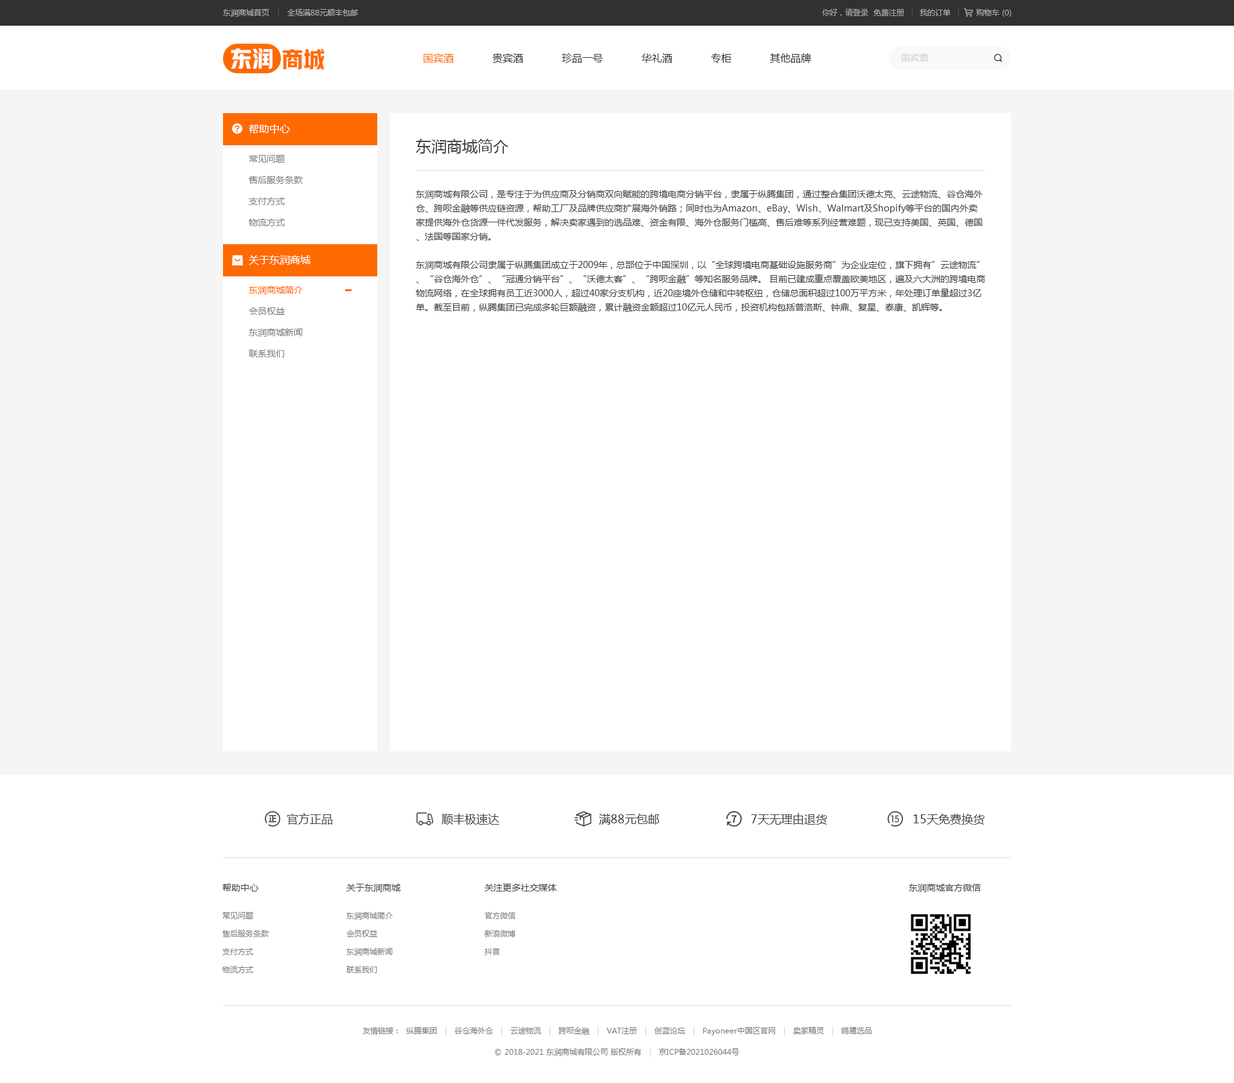
<style>
.page{position:relative;width:1234px;height:1083px;background:#ffffff}
.page>*{position:absolute;margin:0}
.t1{font:7.7px "MicrosoftYaHei";color:#b0b0b0}
.t2{font:7.7px "MicrosoftYaHei";color:#acacac}
.t3{font:21.9px "HYYakuHei-HEW";color:#ffffff}
.t4{font:21.9px "HYYakuHei-HEW";color:#ff6a00}
.t5{font:10.3px "MicrosoftYaHei";color:#333333}
.t6{font:10.3px "MicrosoftYaHei";color:#ff6a00}
.t7{font:9px "MicrosoftYaHei";color:#d2d2d2}
.t8{font:10.3px "MicrosoftYaHei";color:#ffffff}
.t9{font:15.4px "MicrosoftYaHei";color:#434343}
.t10{font:9px/21.2px "MicrosoftYaHei";color:#7d7d7d}
.t11{font:9px/14.1px "MicrosoftYaHei";color:#434343}
.t12{font:9px/21.2px "MicrosoftYaHei";color:#ff6a00}
.t13{font:11.6px "MicrosoftYaHei";color:#434343}
.t14{font:9px "MicrosoftYaHei";color:#434343}
.t15{font:7.7px/18px "MicrosoftYaHei";color:#7d7d7d}
.t16{font:7.7px "MicrosoftYaHei";color:#7d7d7d}
.t17{font:7.7px "MicrosoftYaHei";color:#d2d2d2}
</style>
<div class="page">
<p class="t1" style="left:223px;top:9px;width:135px;height:8px">东润商城首页       全场满88元顺丰包邮</p>
<p class="t2" style="left:822px;top:8px;width:190px;height:9px">你好，请登录  免费注册      我的订单          购物车 (0)</p>
<p class="t3" style="left:231px;top:48px;width:42px;height:21px">东润</p>
<p class="t4" style="left:282px;top:49px;width:43px;height:20px">商城</p>
<p class="t5" style="left:424px;top:53px;width:387px;height:10px"><span class="t6">国宾酒</span>            贵宾酒            珍品一号            华礼酒            专柜            其他品牌</p>
<p class="t7" style="left:902px;top:54px;width:26px;height:8px">国宾酒</p>
<p class="t8" style="left:249px;top:124px;width:41px;height:10px">帮助中心</p>
<p class="t9" style="left:416px;top:139px;width:93px;height:15px">东润商城简介</p>
<p class="t10" style="left:249px;top:155px;width:54px;height:71px">常见问题<br>售后服务条款<br>支付方式<br>物流方式</p>
<p class="t11" style="left:416px;top:190px;width:570px;height:122px">东润商城有限公司，是专注于为供应商及分销商双向赋能的跨境电商分销平台，隶属于纵腾集团，通过整合集团沃德太克、云途物流、谷仓海外仓、跨呗金融等供应链资源，帮助工厂及品牌供应商扩展海外销路；同时也为Amazon、eBay、Wish、Walmart及Shopify等平台的国内外卖家提供海外仓货源一件代发服务，解决卖家遇到的选品难、资金有限、海外仓服务门槛高、售后难等系列经营难题，现已支持美国、英国、德国、法国等国家分销。<br><br>东润商城有限公司隶属于纵腾集团成立于2009年，总部位于中国深圳，以“全球跨境电商基础设施服务商”为企业定位，旗下拥有”云途物流”、“谷仓海外仓”、“冠通分销平台”、“沃德太客”、“跨呗金融”等知名服务品牌。 目前已建成重点覆盖欧美地区，遍及六大洲的跨境电商物流网络，在全球拥有员工近3000人，超过40家分支机构，近20座境外仓储和中转枢纽，仓储总面积超过100万平方米，年处理订单量超过3亿单。截至目前，纵腾集团已完成多轮巨额融资，累计融资金额超过10亿元人民币，投资机构包括普洛斯、钟鼎、复星、泰康、凯辉等。</p>
<p class="t8" style="left:249px;top:255px;width:61px;height:10px">关于东润商城</p>
<p class="t10" style="left:249px;top:286px;width:54px;height:71px"><span class="t12">东润商城简介<br></span>会员权益<br>东润商城新闻<br>联系我们</p>
<p class="t13" style="left:287px;top:813px;width:45px;height:12px">官方正品</p>
<p class="t13" style="left:442px;top:814px;width:58px;height:11px">顺丰极速达</p>
<p class="t13" style="left:599px;top:814px;width:61px;height:11px">满88元包邮</p>
<p class="t13" style="left:751px;top:813px;width:76px;height:12px">7天无理由退货</p>
<p class="t13" style="left:914px;top:814px;width:71px;height:11px">15天免费换货</p>
<p class="t14" style="left:222px;top:884px;width:36px;height:8px">帮助中心</p>
<p class="t14" style="left:346px;top:884px;width:55px;height:8px">关于东润商城</p>
<p class="t14" style="left:485px;top:884px;width:72px;height:8px">关注更多社交媒体</p>
<p class="t14" style="left:909px;top:884px;width:72px;height:8px">东润商城官方微信</p>
<p class="t15" style="left:222px;top:912px;width:47px;height:61px">常见问题<br>售后服务条款<br>支付方式<br>物流方式</p>
<p class="t15" style="left:346px;top:912px;width:47px;height:61px">东润商城简介<br>会员权益<br>东润商城新闻<br>联系我们</p>
<p class="t15" style="left:485px;top:912px;width:31px;height:43px">官方微信<br>新浪微博<br>抖音</p>
<p class="t16" style="left:363px;top:1027px;width:509px;height:9px">友情链接：  纵腾集团   <span class="t17">|   </span>谷仓海外仓   <span class="t17">|   </span>云途物流   <span class="t17">|   </span>跨呗金融   <span class="t17">|   </span>VAT注册   <span class="t17">|   </span>创蓝论坛   <span class="t17">|   </span>Payoneer中国区官网   <span class="t17">|   </span>卖家精灵   <span class="t17">|   </span>鸥鹭选品</p>
<p class="t16" style="left:495px;top:1048px;width:244px;height:9px">© 2018-2021 东润商城有限公司 版权所有   <span class="t17">|   </span>京ICP备2021026044号</p>
</div>
